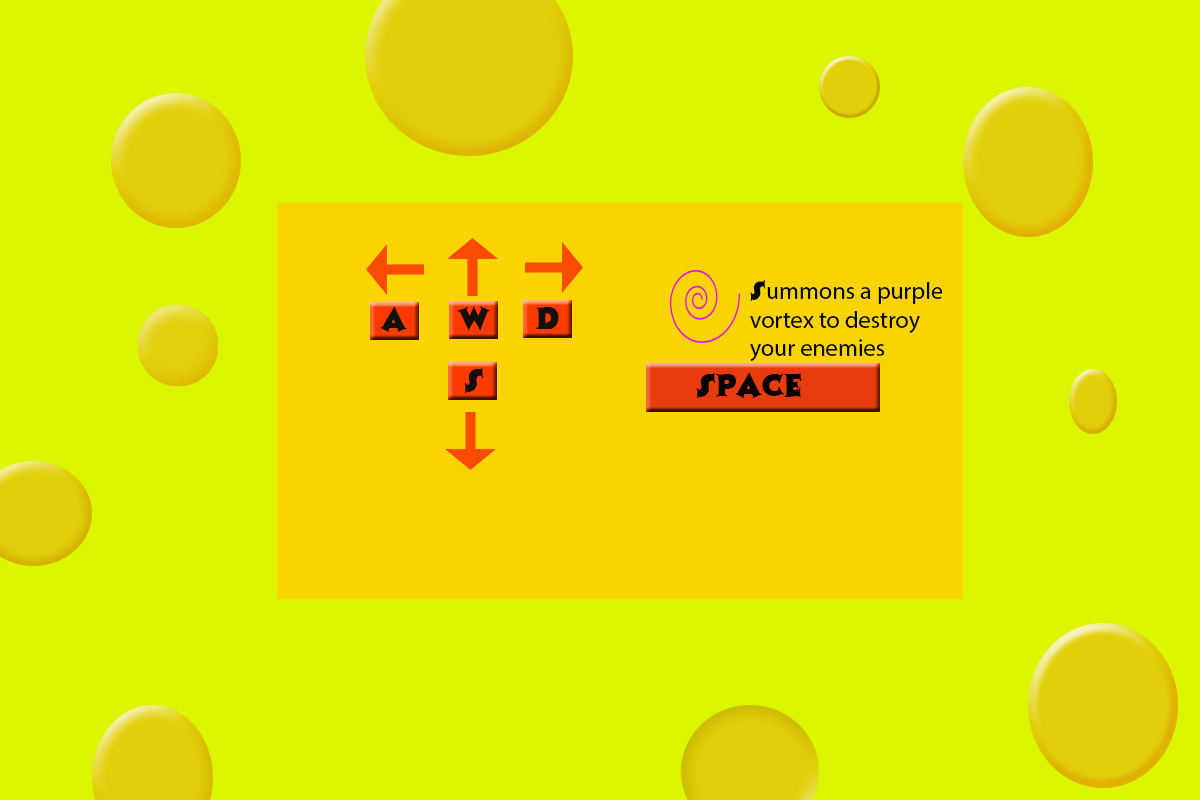
<style>
.page{position:relative;width:1200px;height:800px;background:#dcf600}
.page>*{position:absolute;margin:0}
.t1{font:24px "MyriadPro-Regular";color:#000000}
.t2{font:24px "Colbert";color:#000000}
.t3{font:30px "Colbert";color:#12100f}
.t4{font:30px "Colbert";color:#010101}
</style>
<div class="page">
<p class="t1" style="left:750px;top:280px;width:193px;height:81px"><span class="t2">S</span>ummons a purple vortex to destroy your enemies</p>
<p class="t3" style="left:380px;top:306px;width:27px;height:26px">A</p>
<p class="t3" style="left:457px;top:306px;width:33px;height:25px">W</p>
<p class="t3" style="left:536px;top:307px;width:23px;height:22px">D</p>
<p class="t3" style="left:464px;top:368px;width:20px;height:25px">S</p>
<p class="t4" style="left:696px;top:372px;width:106px;height:26px">SPACE</p>
</div>
